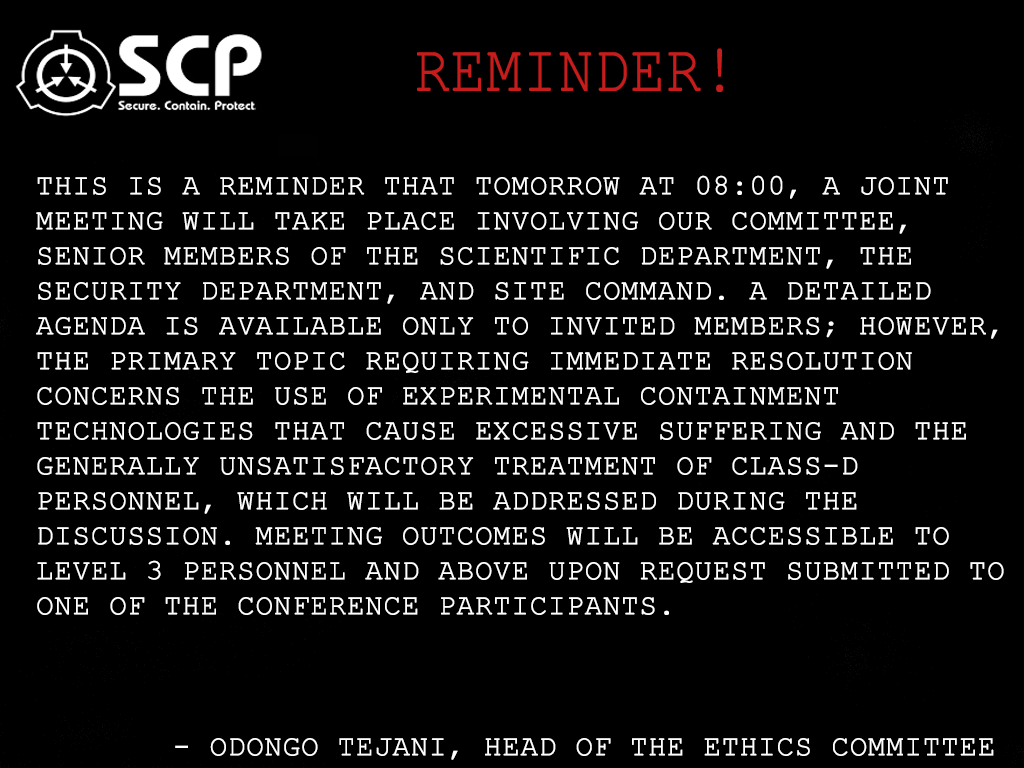
<style>
.page{position:relative;width:1024px;height:768px;background:#000000}
.page>*{position:absolute;margin:0}
.t1{font:66.7px "CourierNewPSMT";color:#c61c1c;text-transform:uppercase;font-weight:bold;scale:0.86 1}
.t2{font:29.2px "CourierNewPSMT";color:#ffffff;text-transform:uppercase;font-weight:bold}
</style>
<div class="page">
<p class="t1" style="left:417px;top:48px;width:306px;height:44px">Reminder!</p>
<p class="t2" style="left:36px;top:175px;width:968px;height:440px;text-align:justify">This is a reminder that tomorrow at 08:00, a joint meeting will take place involving our Committee, senior members of the Scientific Department, the Security Department, and Site Command. A detailed agenda is available only to invited members; however, the primary topic requiring immediate resolution concerns the use of experimental containment technologies that cause excessive suffering and the generally unsatisfactory treatment of Class-D personnel, which will be addressed during the discussion. Meeting outcomes will be accessible to Level 3 personnel and above upon request submitted to one of the conference participants.</p>
<p class="t2" style="left:175px;top:738px;width:819px;height:22px">- Odongo Tejani, head of the Ethics Committee</p>
</div>
